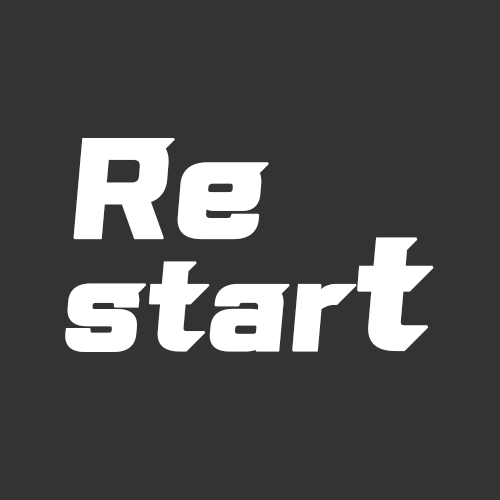
<style>
.page{position:relative;width:500px;height:500px;background:#333333}
.page>*{position:absolute;margin:0}
.t1{font:144.6px "TypoStormB";color:#ffffff;font-weight:bold}
.t2{font:126.8px "TypoStormB";color:#ffffff;font-weight:bold}
.t3{font:160px "TypoStormB";color:#ffffff;font-weight:bold}
</style>
<div class="page">
<p class="t1" style="left:73px;top:138px;width:196px;height:102px">Re</p>
<p class="t2" style="left:65px;top:237px;width:369px;height:115px">star<span class="t3">t</span></p>
</div>
